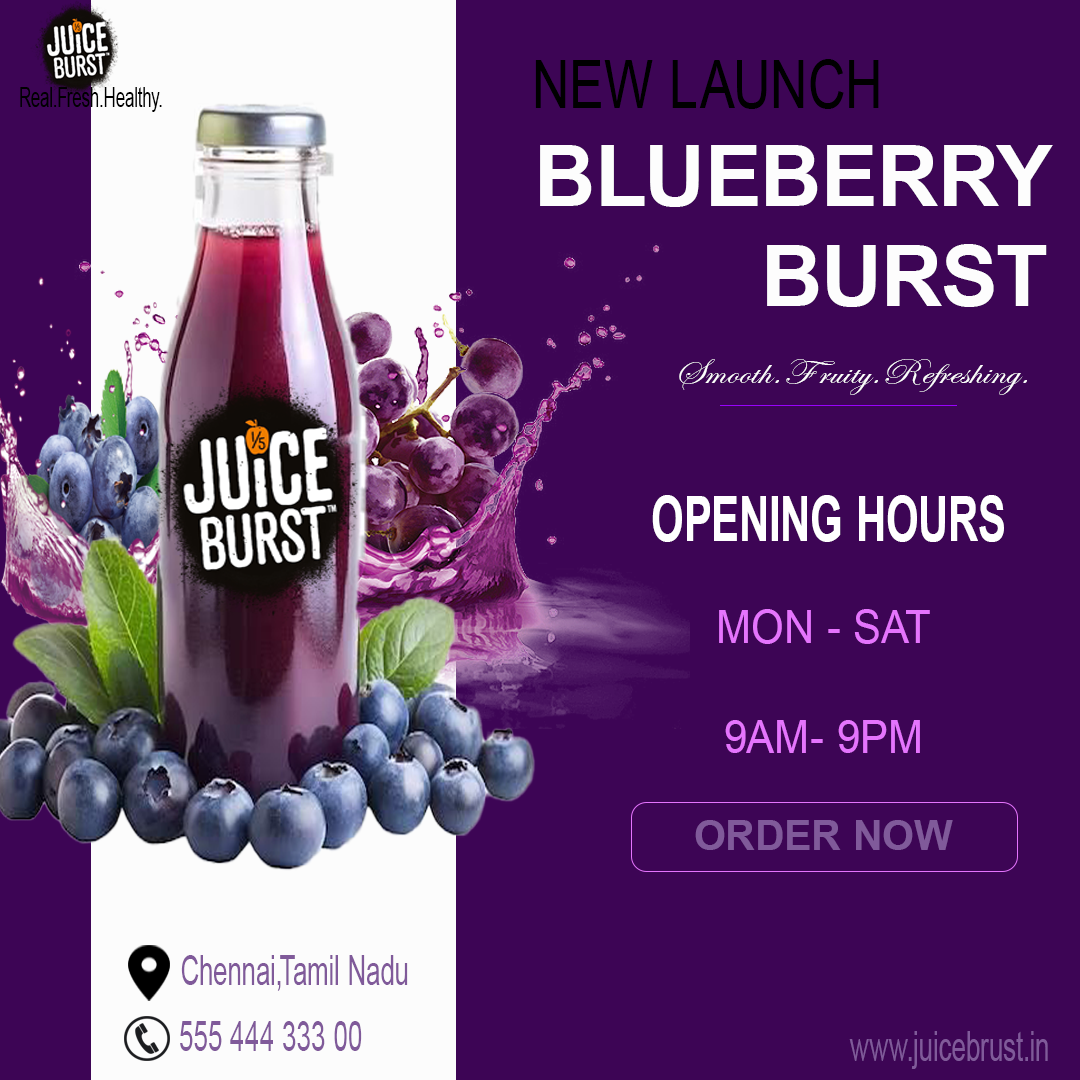
<style>
.page{position:relative;width:1080px;height:1080px;background:#3d0555}
.page>*{position:absolute;margin:0}
.t1{font:67.4px "ArialMT";letter-spacing:0.01em;color:#000000;scale:0.78 1}
.t2{font:26.8px "ArialMT";letter-spacing:0.01em;color:#000000;scale:0.64 1}
.t3{font:85px "Arial-BoldMT";letter-spacing:0.01em;color:#fdfdfd}
.t4{font:36.2px "EdwardianScriptITC";letter-spacing:0.01em;color:#fdfdfd;scale:1.14 1}
.t5{font:62.9px "Arial-BoldMT";letter-spacing:0.01em;color:#ffffff;scale:0.67 1}
.t6{font:46px "ArialMT";letter-spacing:0.01em;color:#e574fd;scale:0.92 1}
.t7{font:41.4px "Arial-BoldMT";letter-spacing:0.01em;color:#805a9a}
.t8{font:40.5px "ArialMT";letter-spacing:0.01em;color:#805a9a;scale:0.65 1}
</style>
<div class="page">
<p class="t1" style="left:535px;top:59px;width:344px;height:50px">NEW LAUNCH</p>
<p class="t2" style="left:20px;top:87px;width:142px;height:25px">Real.Fresh.Healthy.</p>
<p class="t3" style="left:540px;top:145px;width:513px;height:62px">BLUEBERRY</p>
<p class="t3" style="left:767px;top:244px;width:280px;height:63px">BURST</p>
<p class="t4" style="left:679px;top:359px;width:348px;height:36px">Smooth.Fruity.Refreshing.</p>
<p class="t5" style="left:652px;top:495px;width:352px;height:47px">OPENING HOURS</p>
<p class="t6" style="left:719px;top:609px;width:211px;height:144px;text-align:center">MON - SAT<br><br>9AM- 9PM</p>
<p class="t7" style="left:695px;top:820px;width:258px;height:30px">ORDER NOW</p>
<p class="t8" style="left:181px;top:955px;width:227px;height:36px">Chennai,Tamil Nadu</p>
<p class="t8" style="left:180px;top:1021px;width:182px;height:30px">555 444 333 00</p>
<p class="t8" style="left:849px;top:1031px;width:199px;height:38px">www.juicebrust.in</p>
</div>
